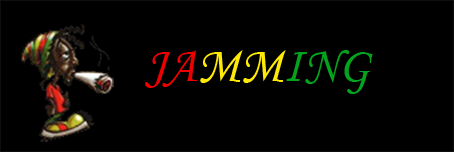
<style>
.page{position:relative;width:454px;height:152px;background:#000000}
.page>*{position:absolute;margin:0}
.t1{font:25.7px "MVBoli";color:#ffea06}
.t2{font:51.4px "MonotypeCorsiva";color:#ee0000}
.t3{font:51.4px "MonotypeCorsiva";color:#ffea06}
.t4{font:51.4px "MonotypeCorsiva";color:#03a31d}
</style>
<div class="page">
<p class="t1" style="left:145px;top:50px;width:228px;height:44px">Jajj<span class="t2">JA</span><span class="t3">MM</span><span class="t4">ING</span></p>
</div>
